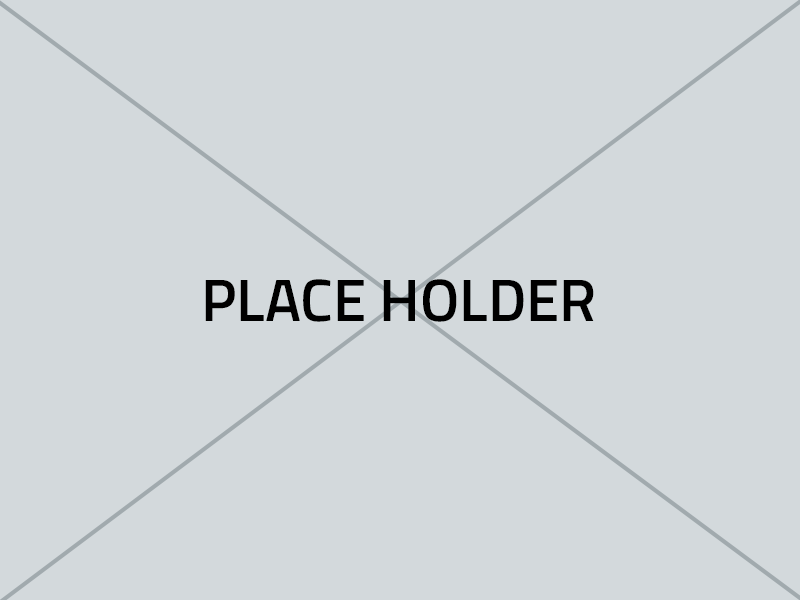
<style>
.page{position:relative;width:800px;height:600px;background:#d3d9dc}
.page>*{position:absolute;margin:0}
.t1{font:60px "TitilliumWeb-SemiBold";color:#000000}
</style>
<div class="page">
<p class="t1" style="left:205px;top:279px;width:389px;height:43px">PLACE HOLDER</p>
</div>
